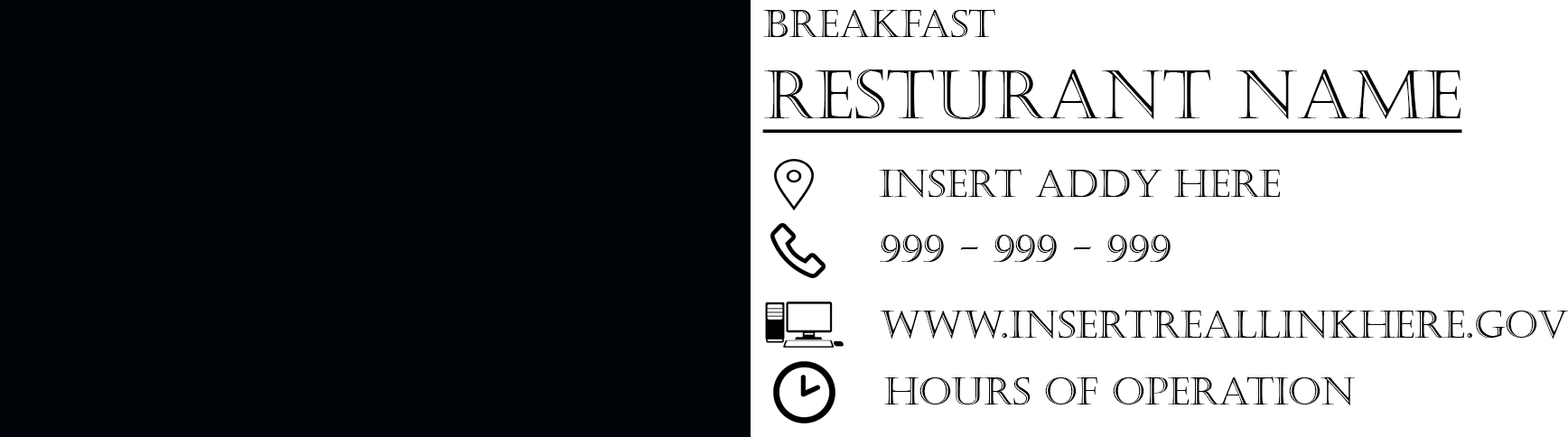
<style>
.page{position:relative;width:1568px;height:437px;background:#000307}
.page>*{position:absolute;margin:0}
.t1{font:37.6px "Castellar";color:#000307}
.t2{font:67.7px "Castellar";color:#000307;text-decoration:underline}
</style>
<div class="page">
<p class="t1" style="left:763px;top:9px;width:232px;height:28px">Breakfast</p>
<p class="t2" style="left:762px;top:70px;width:700px;height:64px">Resturant Name</p>
<p class="t1" style="left:879px;top:169px;width:402px;height:29px">Insert ADDY HERE</p>
<p class="t1" style="left:880px;top:235px;width:291px;height:27px">999 - 999 - 999</p>
<p class="t1" style="left:880px;top:310px;width:688px;height:29px">www.InsertRealLinkHEre.gov</p>
<p class="t1" style="left:884px;top:377px;width:472px;height:29px">Hours of operation</p>
</div>
